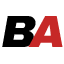
<style>
.page{position:relative;width:64px;height:64px;background:#ffffff}
.page>*{position:absolute;margin:0}
.t1{font:45px "Archivo-BlackItalic";color:#000000}
.t2{font:45px "Archivo-BlackItalic";color:#c62827}
</style>
<div class="page">
<p class="t1" style="left:2px;top:16px;width:61px;height:31px">B<span class="t2">A</span></p>
</div>
